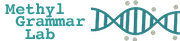
<style>
.page{position:relative;width:180px;height:41px;background:#ffffff}
.page>*{position:absolute;margin:0}
.t1{font:16.7px/12.5px "Courier-Bold";color:#339999}
</style>
<div class="page">
<p class="t1" style="left:5px;top:3px;width:80px;height:37px">Methyl<br> Grammar<br>  Lab</p>
</div>
